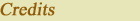
<style>
.page{position:relative;width:140px;height:21px;background:#e6e6b8}
.page>*{position:absolute;margin:0}
.t1{font:18px "TimesNewRomanPSMT";color:#915c07;font-weight:bold;font-style:italic}
</style>
<div class="page">
<p class="t1" style="left:0px;top:2px;width:55px;height:14px">Credits</p>
</div>
